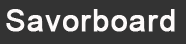
<style>
.page{position:relative;width:186px;height:44px;background:#333333}
.page>*{position:absolute;margin:0}
.t1{font:30px "ArialMT";letter-spacing:0.03em;color:#fdfafa;font-weight:bold}
</style>
<div class="page">
<p class="t1" style="left:6px;top:9px;width:169px;height:23px">Savorboard</p>
</div>
